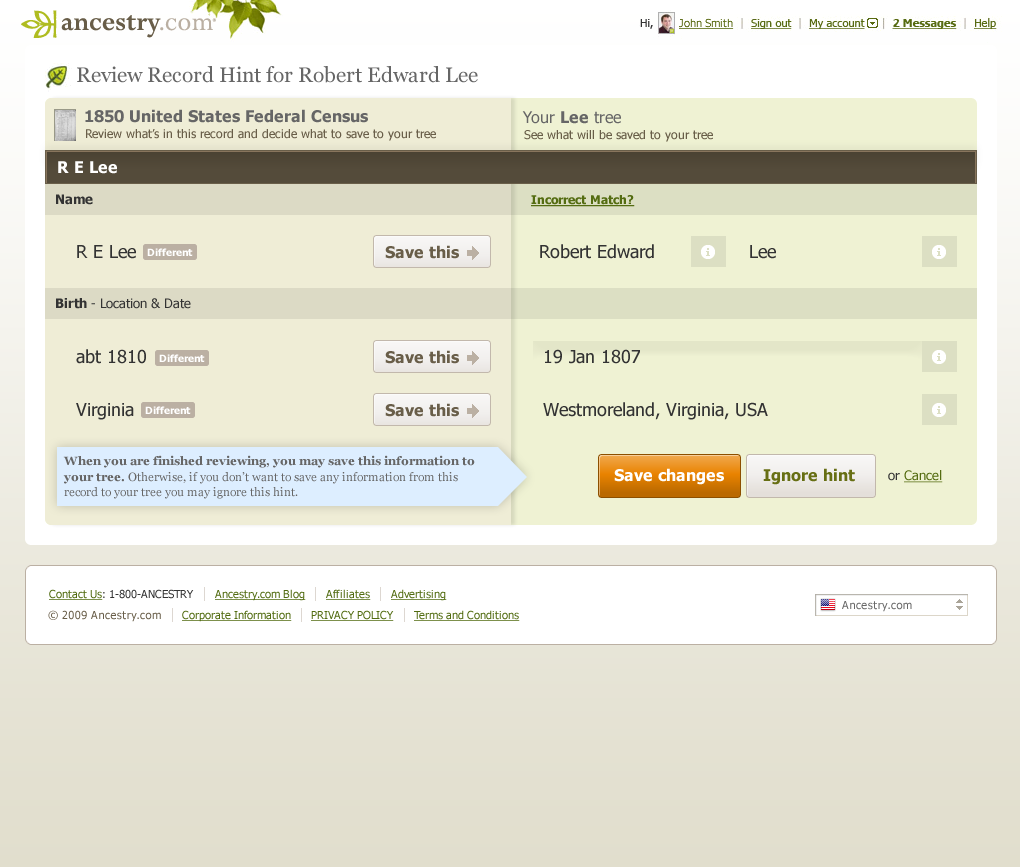
<style>
.page{position:relative;width:1020px;height:867px}
.page>*{position:absolute;margin:0}
.t1{font:21px "Georgia";color:#666666}
.t2{font:16px "Tahoma-Bold";color:#666666}
.t3{font:16px "Tahoma";color:#666666}
.t4{font:12px "Tahoma";color:#695e49}
.t5{font:12px "Tahoma";color:#685e48}
.t6{font:13px "Tahoma-Bold";color:#333333}
.t7{font:12px "Tahoma-Bold";color:#546c11;text-decoration:underline}
.t8{font:18px "Tahoma";color:#333333}
.t9{font:13px "Tahoma";color:#333333}
.t10{font:12px/15.6px "Georgia";color:#666666}
.t11{font:12px/15.6px "Georgia-Bold";color:#666666}
.t12{font:13px "Tahoma";color:#556c11;text-decoration:underline}
</style>
<div class="page">
<p class="t1" style="left:77px;top:66px;width:401px;height:17px">Review Record Hint for Robert Edward Lee</p>
<p class="t2" style="left:85px;top:109px;width:283px;height:14px">1850 United States Federal Census</p>
<p class="t3" style="left:522px;top:111px;width:99px;height:13px">Your<span class="t2"> Lee </span>tree</p>
<p class="t4" style="left:86px;top:129px;width:350px;height:12px">Review what’s in this record and decide what to save to your tree</p>
<p class="t5" style="left:524px;top:130px;width:189px;height:12px">See what will be saved to your tree</p>
<p class="t6" style="left:56px;top:194px;width:37px;height:11px">Name</p>
<p class="t7" style="left:531px;top:195px;width:104px;height:12px">Incorrect Match?</p>
<p class="t8" style="left:77px;top:245px;width:59px;height:14px">R E Lee</p>
<p class="t8" style="left:540px;top:244px;width:114px;height:15px">Robert Edward</p>
<p class="t8" style="left:750px;top:245px;width:26px;height:14px">Lee</p>
<p class="t9" style="left:56px;top:298px;width:135px;height:11px"><span class="t6">Birth </span>- Location &amp; Date</p>
<p class="t8" style="left:76px;top:349px;width:70px;height:15px">abt 1810</p>
<p class="t8" style="left:545px;top:349px;width:95px;height:15px">19 Jan 1807</p>
<p class="t8" style="left:76px;top:403px;width:58px;height:17px">Virginia</p>
<p class="t8" style="left:543px;top:402px;width:225px;height:18px">Westmoreland, Virginia, USA</p>
<p class="t10" style="left:63px;top:455px;width:412px;height:44px"><span class="t11">When you are finished reviewing, you may save this information to your tree. </span>Otherwise, if you don’t want to save any information from this record to your tree you may ignore this hint.</p>
<p class="t12" style="left:888px;top:470px;width:55px;height:13px"><span class="t9">or </span>Cancel</p>
</div>
